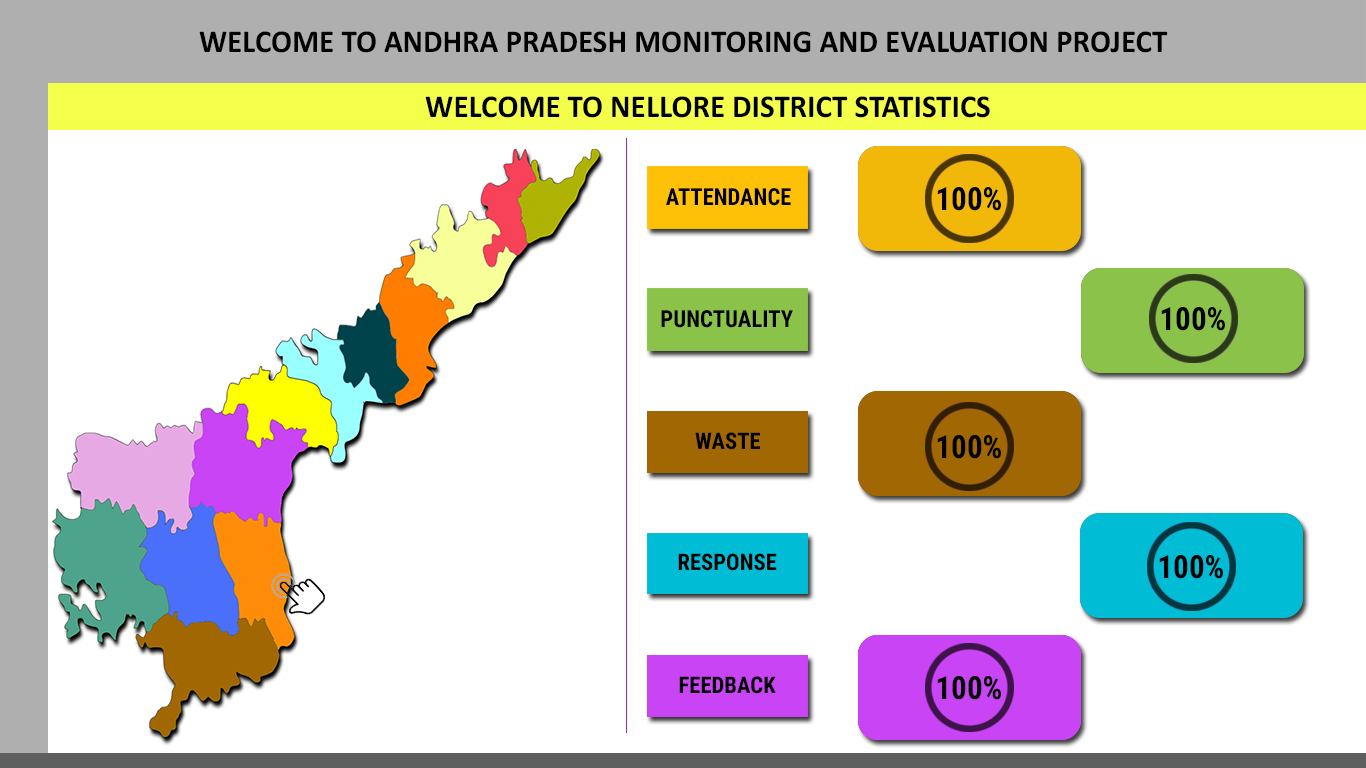
<style>
.page{position:relative;width:1366px;height:768px;background:#ffffff}
.page>*{position:absolute;margin:0}
.t1{font:32px "Calibri-Bold";color:#000000;scale:0.97 1}
.t2{font:23.4px "RobotoCondensed-Bold";color:#000000;scale:0.96 1}
.t3{font:32px "RobotoCondensed-Bold";color:#000000;scale:0.97 1}
.t4{font:23.4px "RobotoCondensed-Bold";color:#000000}
.t5{font:23.1px "RobotoCondensed-Bold";color:#000000}
.t6{font:22.7px "RobotoCondensed-Bold";color:#000000}
</style>
<div class="page">
<p class="t1" style="left:199px;top:31px;width:969px;height:22px">WELCOME TO ANDHRA PRADESH MONITORING AND EVALUATION PROJECT</p>
<p class="t1" style="left:425px;top:96px;width:565px;height:22px">WELCOME TO NELLORE DISTRICT STATISTICS</p>
<p class="t2" style="left:666px;top:188px;width:125px;height:18px">ATTENDANCE</p>
<p class="t3" style="left:937px;top:187px;width:64px;height:24px">100%</p>
<p class="t4" style="left:661px;top:310px;width:132px;height:18px">PUNCTUALITY</p>
<p class="t3" style="left:1161px;top:307px;width:64px;height:24px">100%</p>
<p class="t5" style="left:695px;top:432px;width:65px;height:18px">WASTE</p>
<p class="t3" style="left:937px;top:435px;width:64px;height:24px">100%</p>
<p class="t6" style="left:678px;top:553px;width:99px;height:18px">RESPONSE</p>
<p class="t3" style="left:1159px;top:555px;width:64px;height:24px">100%</p>
<p class="t5" style="left:679px;top:676px;width:97px;height:18px">FEEDBACK</p>
<p class="t3" style="left:937px;top:676px;width:64px;height:24px">100%</p>
</div>
